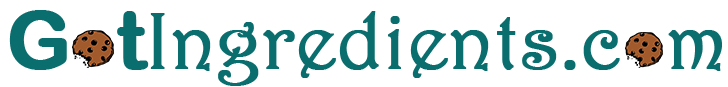
<style>
.page{position:relative;width:728px;height:87px;background:#ffffff}
.page>*{position:absolute;margin:0}
.t1{font:80px "Harrington";color:#0a6e6e;font-weight:bold}
.t2{font:80px "ArialRoundedMTBold";color:#0a6e6e;font-weight:bold}
</style>
<div class="page">
<p class="t1" style="left:9px;top:10px;width:713px;height:76px"><span class="t2">G  t</span>Ingredients.c  m</p>
</div>
